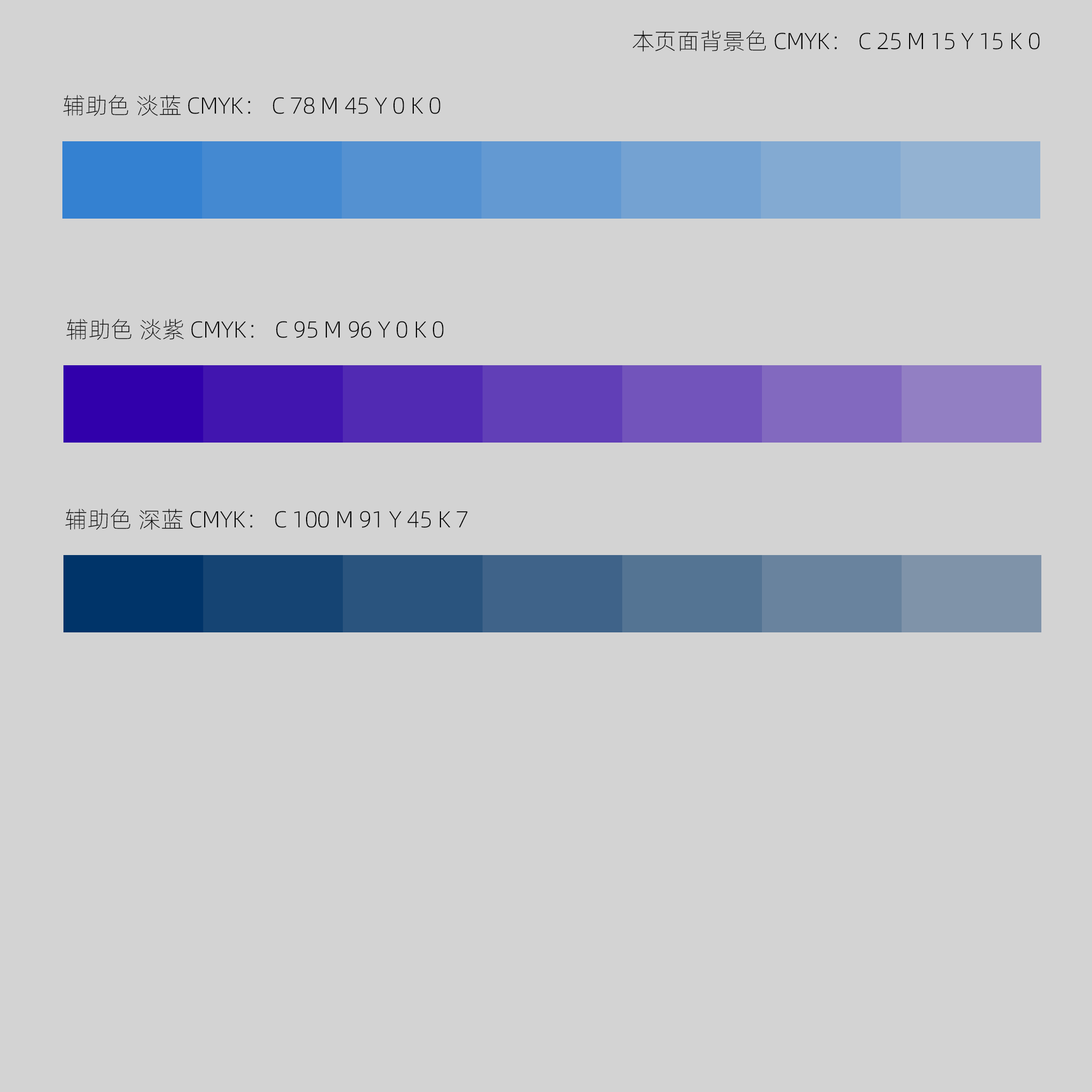
<style>
.page{position:relative;width:1092px;height:1092px;background:#d3d3d3}
.page>*{position:absolute;margin:0}
.t1{font:23px "Alibaba-PuHuiTi-L";color:#000000}
</style>
<div class="page">
<p class="t1" style="left:632px;top:30px;width:408px;height:22px">本页面背景色 CMYK： C 25 M 15 Y 15 K 0</p>
<p class="t1" style="left:63px;top:95px;width:377px;height:21px">辅助色 淡蓝 CMYK： C 78 M 45 Y 0 K 0</p>
<p class="t1" style="left:66px;top:319px;width:378px;height:21px">辅助色 淡紫 CMYK： C 95 M 96 Y 0 K 0</p>
<p class="t1" style="left:65px;top:509px;width:403px;height:21px">辅助色 深蓝 CMYK： C 100 M 91 Y 45 K 7</p>
</div>
